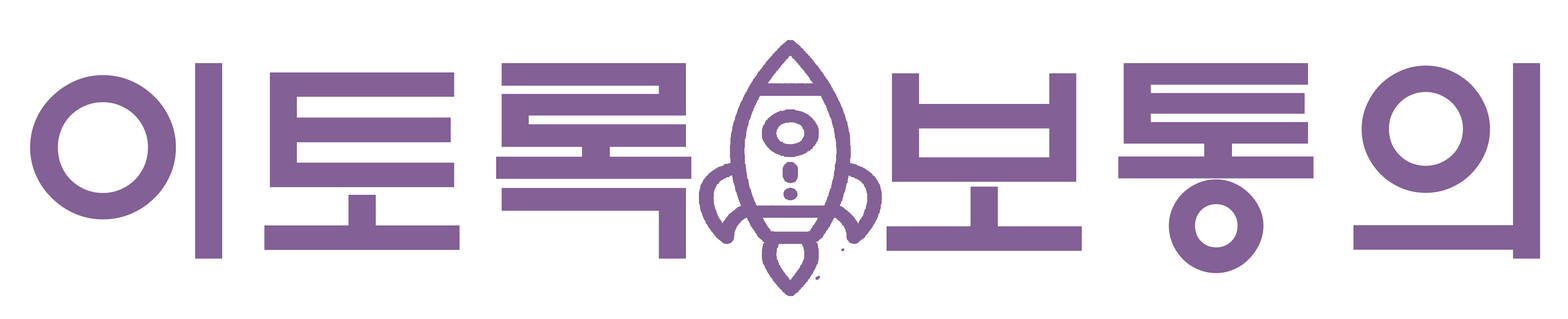
<style>
.page{position:relative;width:1568px;height:319px;background:#ffffff}
.page>*{position:absolute;margin:0}
.t1{font:226.6px "Yj-TEUNTEUN--Bold";color:#836096}
</style>
<div class="page">
<p class="t1" style="left:30px;top:63px;width:1510px;height:210px">이토록  보통의</p>
</div>
